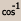
<style>
.page{position:relative;width:21px;height:21px;background:#d9cdc1}
.page>*{position:absolute;margin:0}
.t1{font:9px "Tahoma";color:#000000}
</style>
<div class="page">
<p class="t1" style="left:12px;top:2px;width:8px;height:7px">-1</p>
<p class="t1" style="left:2px;top:9px;width:13px;height:7px">cos</p>
</div>
